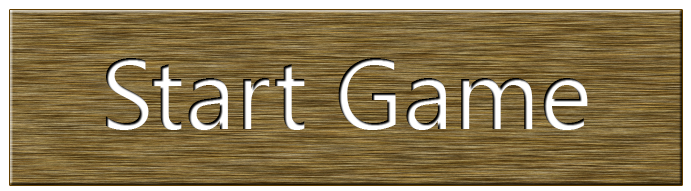
<style>
.page{position:relative;width:691px;height:191px}
.page>*{position:absolute;margin:0}
.t1{font:100px "SegoeUIHistoric";color:#ffffff}
</style>
<div class="page">
<p class="t1" style="left:105px;top:58px;width:483px;height:72px">Start Game</p>
</div>
